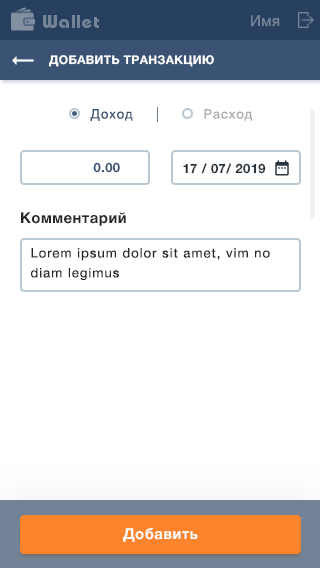
<style>
.page{position:relative;width:320px;height:568px;background:#ffffff}
.page>*{position:absolute;margin:0}
.t1{font:18px "BauhausC-Bold";letter-spacing:0.06em;color:#758397}
.t2{font:15px "HelveticaNeueCyr-Roman";letter-spacing:0.03em;color:#79879a}
.t3{font:12px "HelveticaNeueCyr-Bold";letter-spacing:0.03em;color:#ffffff;text-transform:uppercase}
.t4{font:13px "HelveticaNeueCyr-Roman";letter-spacing:0.08em;color:#3a5374}
.t5{font:13px "HelveticaNeueCyr-Roman";letter-spacing:0.08em;color:#aaaaaa}
.t6{font:13px "HelveticaNeueCyr-Bold";letter-spacing:0.03em;color:#3a5374}
.t7{font:13px "HelveticaNeueCyr-Bold";letter-spacing:0.03em;color:#2c353e}
.t8{font:15px "HelveticaNeueCyr-Bold";letter-spacing:0.03em;color:#282828}
.t9{font:13px/18px "HelveticaNeueCyr-Roman";letter-spacing:0.08em;color:#282828}
.t10{font:15px "HelveticaNeueCyr-Bold";letter-spacing:0.03em;color:#ffffff}
</style>
<div class="page">
<p class="t1" style="left:43px;top:15px;width:56px;height:13px">Wallet</p>
<p class="t2" style="left:251px;top:15px;width:29px;height:12px">Имя</p>
<p class="t3" style="left:49px;top:55px;width:165px;height:12px">Добавить транзакцию</p>
<p class="t4" style="left:90px;top:109px;width:43px;height:12px">Доход</p>
<p class="t5" style="left:204px;top:109px;width:48px;height:12px">Расход</p>
<p class="t6" style="left:93px;top:162px;width:27px;height:11px">0.00</p>
<p class="t7" style="left:183px;top:163px;width:83px;height:11px">17 / 07/ 2019</p>
<p class="t8" style="left:21px;top:212px;width:105px;height:14px">Комментарий</p>
<p class="t9" style="left:31px;top:248px;width:239px;height:33px">Lorem ipsum dolor sit amet, vim no <br>diam legimus</p>
<p class="t10" style="left:123px;top:528px;width:75px;height:14px">Добавить</p>
</div>
